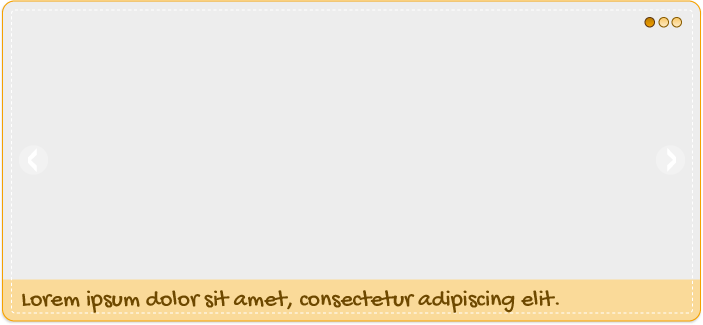
<style>
.page{position:relative;width:703px;height:325px;background:#ededed}
.page>*{position:absolute;margin:0}
.t1{font:24px "GochiHand-Regular";color:#6e4900}
</style>
<div class="page">
<p class="t1" style="left:22px;top:290px;width:537px;height:23px">Lorem ipsum dolor sit amet, consectetur adipiscing elit.</p>
</div>
